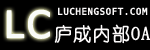
<style>
.page{position:relative;width:150px;height:50px;background:#000000}
.page>*{position:absolute;margin:0}
.t1{font:37px "BitstreamVeraSans-Roman";letter-spacing:0.05em;color:#f5f8f5;text-transform:uppercase;font-weight:bold;scale:0.96 1}
.t2{font:9.2px "BitstreamVeraSansMono-Roman";letter-spacing:0.05em;color:#fbf9f9;text-transform:uppercase;font-weight:bold;scale:0.96 1}
.t3{font:18.5px "BitstreamVeraSansMono-Roman";letter-spacing:0.05em;color:#fbf9f9;text-transform:uppercase;font-weight:bold;scale:0.96 1}
.t4{font:18.5px "YouYuan";letter-spacing:0.05em;color:#fbf9f9;text-transform:uppercase;font-weight:bold;scale:0.96 1}
</style>
<div class="page">
<p class="t1" style="left:6px;top:9px;width:44px;height:30px">LC</p>
<p class="t2" style="left:54px;top:7px;width:97px;height:37px;text-align:center"><span class="t3"><br></span>luchengsoft.com<br><br><br><span class="t4">庐成内部OA</span></p>
</div>
